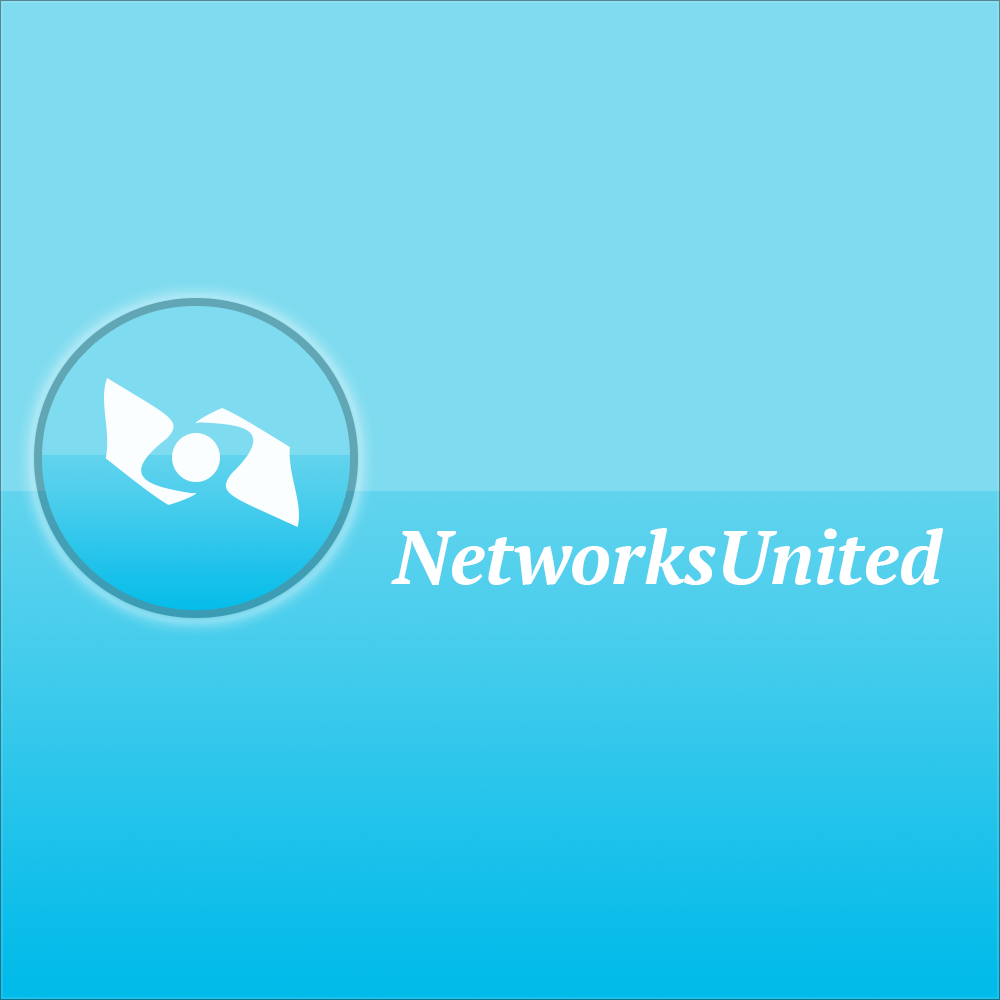
<style>
.page{position:relative;width:1000px;height:1000px;background:#7fdbef}
.page>*{position:absolute;margin:0}
.t1{font:74.7px "PTSerif-BoldItalic";color:#ffffff}
</style>
<div class="page">
<p class="t1" style="left:391px;top:528px;width:553px;height:57px">NetworksUnited</p>
</div>
